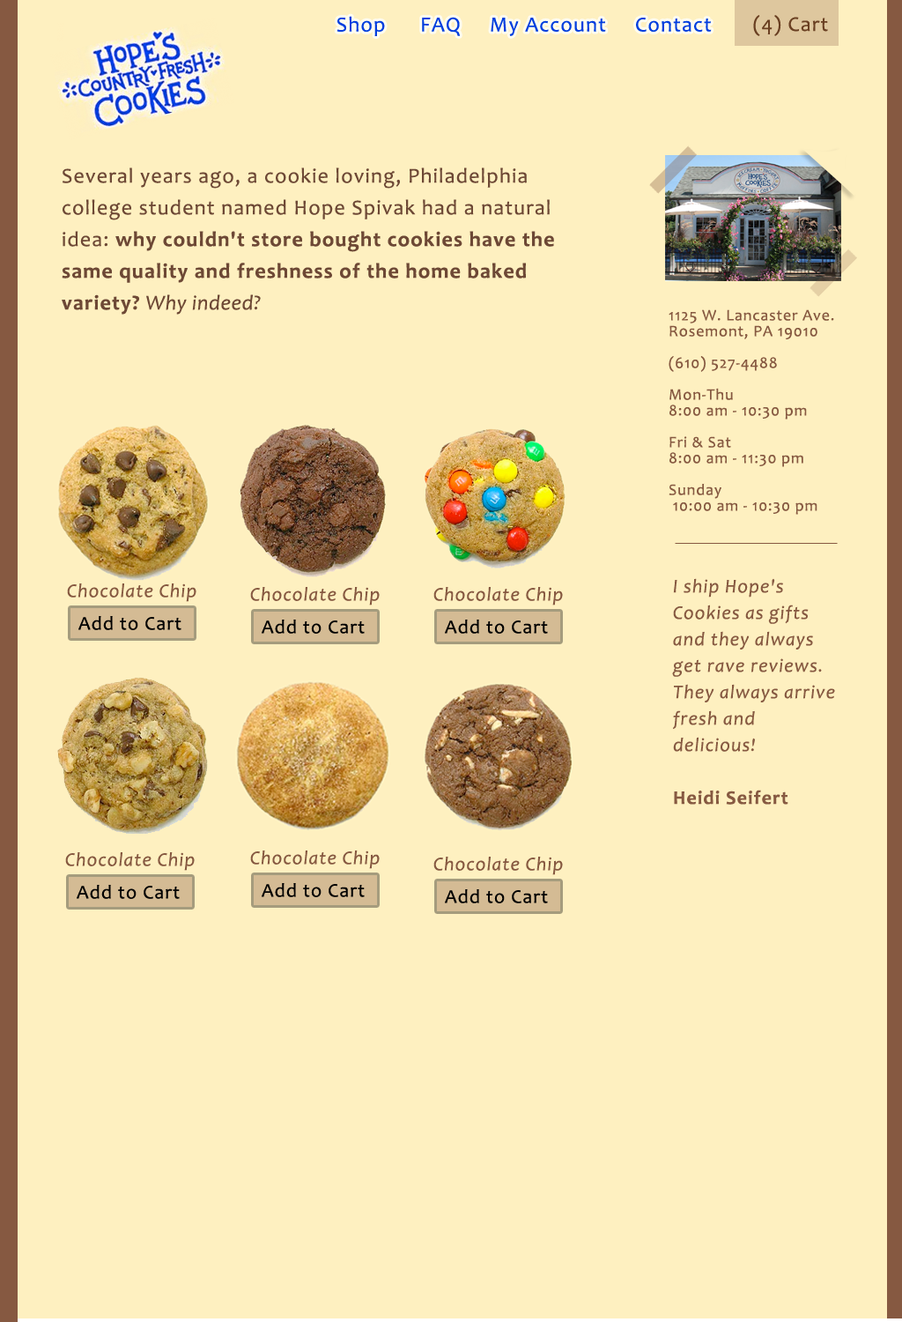
<style>
.page{position:relative;width:902px;height:1322px;background:#fef0c0}
.page>*{position:absolute;margin:0}
.t1{font:21.1px "Candara";letter-spacing:0.05em;color:#003ede}
.t2{font:21.1px "Candara";letter-spacing:0.05em;color:#6a4022}
.t3{font:21.1px/31.7px "Candara";letter-spacing:0.05em;color:#6d4835}
.t4{font:21.1px/31.7px "Candara-Bold";letter-spacing:0.05em;color:#6d4835}
.t5{font:21.1px/31.7px "Candara-Italic";letter-spacing:0.025em;color:#6d4835}
.t6{font:15.9px/15.9px "Candara";letter-spacing:0.05em;color:#865941}
.t7{font:19.4px/26.4px "Candara-Italic";letter-spacing:0.05em;color:#865941}
.t8{font:19.4px/26.4px "Candara-Bold";letter-spacing:0.05em;color:#865941}
.t9{font:19.4px "Candara-Italic";letter-spacing:0.05em;color:#865941}
.t10{font:19.4px "Candara";letter-spacing:0.05em;color:#010101}
</style>
<div class="page">
<p class="t1" style="left:337px;top:16px;width:375px;height:20px">Shop      FAQ     My Account     Contact</p>
<p class="t2" style="left:753px;top:15px;width:75px;height:21px">(4) Cart</p>
<p class="t3" style="left:62px;top:167px;width:492px;height:148px">Several years ago, a cookie loving, Philadelphia college student named Hope Spivak had a natural idea: <span class="t4">why couldn't store bought cookies have the same quality and freshness of the home baked variety? </span><span class="t5">Why indeed?</span></p>
<p class="t6" style="left:669px;top:309px;width:165px;height:206px">1125 W. Lancaster Ave.<br>Rosemont, PA 19010<br><br>(610) 527-4488<br><br>Mon-Thu   <br>8:00 am - 10:30 pm<br><br>Fri &amp; Sat  <br>8:00 am - 11:30 pm<br><br>Sunday    <br> 10:00 am - 10:30 pm</p>
<p class="t7" style="left:672px;top:578px;width:163px;height:226px">I ship Hope's Cookies as gifts and they always get rave reviews. They always arrive fresh and delicious!<br><br><span class="t8">Heidi Seifert</span></p>
<p class="t9" style="left:67px;top:583px;width:129px;height:19px">Chocolate Chip</p>
<p class="t9" style="left:250px;top:587px;width:130px;height:18px">Chocolate Chip</p>
<p class="t9" style="left:433px;top:587px;width:130px;height:18px">Chocolate Chip</p>
<p class="t10" style="left:78px;top:616px;width:104px;height:14px">Add to Cart</p>
<p class="t10" style="left:262px;top:619px;width:103px;height:15px">Add to Cart</p>
<p class="t10" style="left:445px;top:619px;width:103px;height:15px">Add to Cart</p>
<p class="t9" style="left:65px;top:852px;width:130px;height:19px">Chocolate Chip</p>
<p class="t9" style="left:250px;top:850px;width:130px;height:19px">Chocolate Chip</p>
<p class="t9" style="left:433px;top:856px;width:130px;height:19px">Chocolate Chip</p>
<p class="t10" style="left:77px;top:885px;width:103px;height:14px">Add to Cart</p>
<p class="t10" style="left:262px;top:883px;width:103px;height:14px">Add to Cart</p>
<p class="t10" style="left:445px;top:889px;width:103px;height:14px">Add to Cart</p>
</div>
